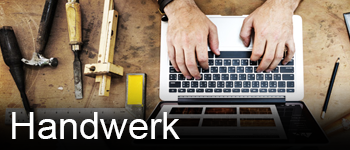
<style>
.page{position:relative;width:350px;height:150px}
.page>*{position:absolute;margin:0}
.t1{font:38px "ArialMT";color:#ffffff}
</style>
<div class="page">
<p class="t1" style="left:12px;top:112px;width:168px;height:27px">Handwerk</p>
</div>
